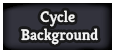
<style>
.page{position:relative;width:115px;height:53px}
.page>*{position:absolute;margin:0}
.t1{font:15.4px "Kreon-Bold";color:#f3f3f3}
</style>
<div class="page">
<p class="t1" style="left:21px;top:10px;width:77px;height:35px;text-align:center">Cycle <br>Background</p>
</div>
